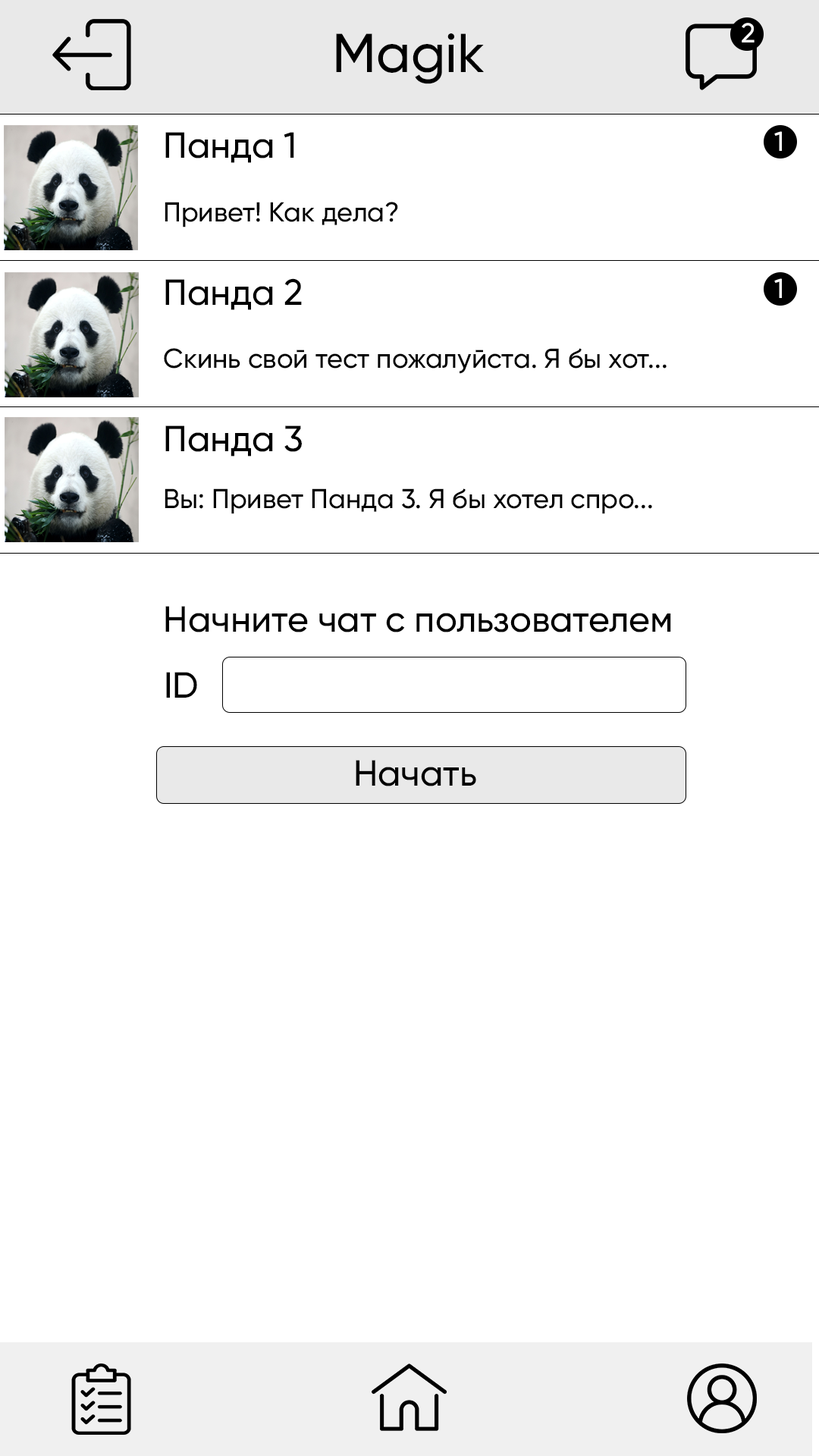
<style>
.page{position:relative;width:819px;height:1456px;background:#ffffff}
.page>*{position:absolute;margin:0}
.t1{font:27.3px "Gilroy-Medium";color:#ffffff}
.t2{font:54.6px "Gilroy-Medium";color:#000000}
.t3{font:36.4px "Gilroy-Medium";color:#000000}
.t4{font:27.3px "Gilroy-Medium";color:#000000}
</style>
<div class="page">
<p class="t1" style="left:742px;top:23px;width:13px;height:19px">2</p>
<p class="t2" style="left:336px;top:33px;width:148px;height:51px">Magik</p>
<p class="t3" style="left:165px;top:132px;width:129px;height:31px">Панда 1</p>
<p class="t1" style="left:774px;top:131px;width:8px;height:20px">1</p>
<p class="t4" style="left:165px;top:202px;width:233px;height:25px">Привет! Как дела?</p>
<p class="t3" style="left:165px;top:278px;width:137px;height:32px">Панда 2</p>
<p class="t1" style="left:774px;top:278px;width:8px;height:20px">1</p>
<p class="t4" style="left:164px;top:348px;width:503px;height:26px">Скинь свой тест пожалуйста. Я бы хот...</p>
<p class="t3" style="left:165px;top:425px;width:137px;height:32px">Панда 3</p>
<p class="t4" style="left:165px;top:488px;width:487px;height:26px">Вы: Привет Панда 3. Я бы хотел спро...</p>
<p class="t3" style="left:165px;top:606px;width:506px;height:26px">Начните чат с пользователем</p>
<p class="t3" style="left:166px;top:672px;width:31px;height:26px">ID</p>
<p class="t3" style="left:356px;top:760px;width:120px;height:26px">Начать</p>
</div>
